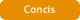
<style>
.page{position:relative;width:80px;height:20px;background:#e68d00}
.page>*{position:absolute;margin:0}
.t1{font:11px "MyriadPro-Semibold";color:#ffffff}
</style>
<div class="page">
<p class="t1" style="left:24px;top:5px;width:31px;height:8px">Concis</p>
</div>
